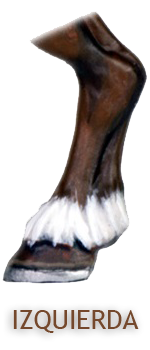
<style>
.page{position:relative;width:150px;height:350px;background:#ffffff}
.page>*{position:absolute;margin:0}
.t1{font:26.7px "TrebuchetMS";color:#74482c}
</style>
<div class="page">
<p class="t1" style="left:13px;top:310px;width:126px;height:23px">IZQUIERDA</p>
</div>
